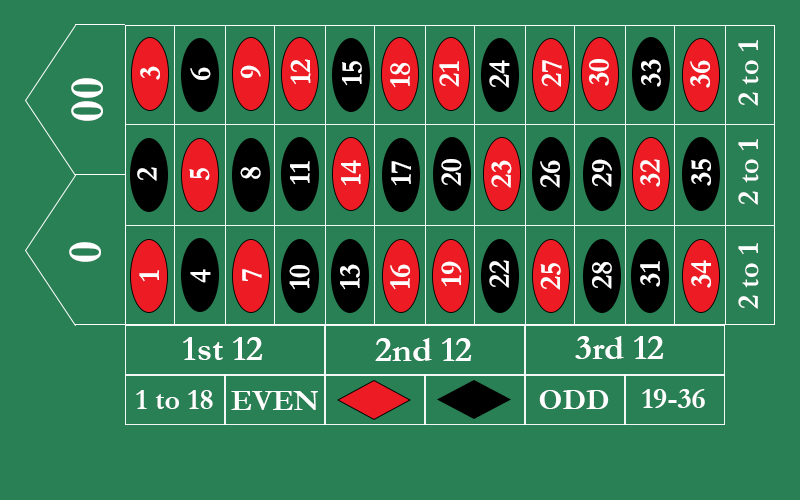
<style>
.page{position:relative;width:800px;height:500px;background:#298054}
.page>*{position:absolute;margin:0}
.t1{font:30px "Garamond-Bold";color:#ffffff}
.t2{font:48px "Garamond-Bold";color:#ffffff}
.t3{font:36px "Garamond-Bold";color:#ffffff}
</style>
<div class="page">
<p class="t1" style="left:738px;top:40px;width:21px;height:66px;rotate:-90deg">2 to 1</p>
<p class="t1" style="left:240px;top:65px;width:21px;height:13px;rotate:-90deg">9</p>
<p class="t1" style="left:290px;top:59px;width:21px;height:26px;rotate:-90deg">12</p>
<p class="t1" style="left:342px;top:61px;width:20px;height:25px;rotate:-90deg">15</p>
<p class="t1" style="left:390px;top:63px;width:20px;height:25px;rotate:-90deg">18</p>
<p class="t1" style="left:439px;top:61px;width:20px;height:26px;rotate:-90deg">21</p>
<p class="t1" style="left:489px;top:60px;width:21px;height:28px;rotate:-90deg">24</p>
<p class="t1" style="left:541px;top:60px;width:21px;height:27px;rotate:-90deg">27</p>
<p class="t1" style="left:589px;top:59px;width:20px;height:27px;rotate:-90deg">30</p>
<p class="t1" style="left:641px;top:59px;width:20px;height:28px;rotate:-90deg">33</p>
<p class="t1" style="left:690px;top:60px;width:20px;height:28px;rotate:-90deg">36</p>
<p class="t2" style="left:71px;top:78px;width:32px;height:43px;rotate:-90deg">00</p>
<p class="t1" style="left:140px;top:66px;width:20px;height:14px;rotate:-90deg">3</p>
<p class="t1" style="left:190px;top:67px;width:21px;height:13px;rotate:-90deg">6</p>
<p class="t1" style="left:738px;top:139px;width:21px;height:66px;rotate:-90deg">2 to 1</p>
<p class="t1" style="left:290px;top:161px;width:20px;height:24px;rotate:-90deg">11</p>
<p class="t1" style="left:341px;top:160px;width:20px;height:26px;rotate:-90deg">14</p>
<p class="t1" style="left:391px;top:161px;width:20px;height:25px;rotate:-90deg">17</p>
<p class="t1" style="left:441px;top:159px;width:21px;height:27px;rotate:-90deg">20</p>
<p class="t1" style="left:491px;top:160px;width:21px;height:28px;rotate:-90deg">23</p>
<p class="t1" style="left:540px;top:160px;width:20px;height:28px;rotate:-90deg">26</p>
<p class="t1" style="left:592px;top:159px;width:20px;height:28px;rotate:-90deg">29</p>
<p class="t1" style="left:640px;top:159px;width:20px;height:28px;rotate:-90deg">32</p>
<p class="t1" style="left:691px;top:159px;width:20px;height:27px;rotate:-90deg">35</p>
<p class="t1" style="left:137px;top:167px;width:20px;height:14px;rotate:-90deg">2</p>
<p class="t1" style="left:189px;top:168px;width:21px;height:12px;rotate:-90deg">5</p>
<p class="t1" style="left:240px;top:167px;width:21px;height:12px;rotate:-90deg">8</p>
<p class="t2" style="left:69px;top:242px;width:32px;height:20px;rotate:-90deg">0</p>
<p class="t1" style="left:738px;top:243px;width:21px;height:66px;rotate:-90deg">2 to 1</p>
<p class="t1" style="left:139px;top:270px;width:20px;height:12px;rotate:-90deg">1</p>
<p class="t1" style="left:190px;top:269px;width:21px;height:14px;rotate:-90deg">4</p>
<p class="t1" style="left:242px;top:269px;width:20px;height:12px;rotate:-90deg">7</p>
<p class="t1" style="left:289px;top:265px;width:21px;height:25px;rotate:-90deg">10</p>
<p class="t1" style="left:340px;top:264px;width:20px;height:26px;rotate:-90deg">13</p>
<p class="t1" style="left:390px;top:264px;width:20px;height:26px;rotate:-90deg">16</p>
<p class="t1" style="left:441px;top:261px;width:21px;height:26px;rotate:-90deg">19</p>
<p class="t1" style="left:489px;top:260px;width:20px;height:28px;rotate:-90deg">22</p>
<p class="t1" style="left:540px;top:263px;width:21px;height:27px;rotate:-90deg">25</p>
<p class="t1" style="left:592px;top:262px;width:20px;height:27px;rotate:-90deg">28</p>
<p class="t1" style="left:640px;top:261px;width:20px;height:26px;rotate:-90deg">31</p>
<p class="t1" style="left:691px;top:260px;width:20px;height:28px;rotate:-90deg">34</p>
<p class="t3" style="left:183px;top:337px;width:80px;height:23px">1st 12</p>
<p class="t3" style="left:375px;top:338px;width:97px;height:23px">2nd 12</p>
<p class="t3" style="left:575px;top:336px;width:89px;height:23px">3rd 12</p>
<p class="t1" style="left:136px;top:390px;width:77px;height:19px">1 to 18</p>
<p class="t1" style="left:539px;top:390px;width:70px;height:19px">ODD</p>
<p class="t1" style="left:642px;top:389px;width:63px;height:19px">19-36</p>
<p class="t1" style="left:231px;top:391px;width:87px;height:19px">EVEN</p>
</div>
